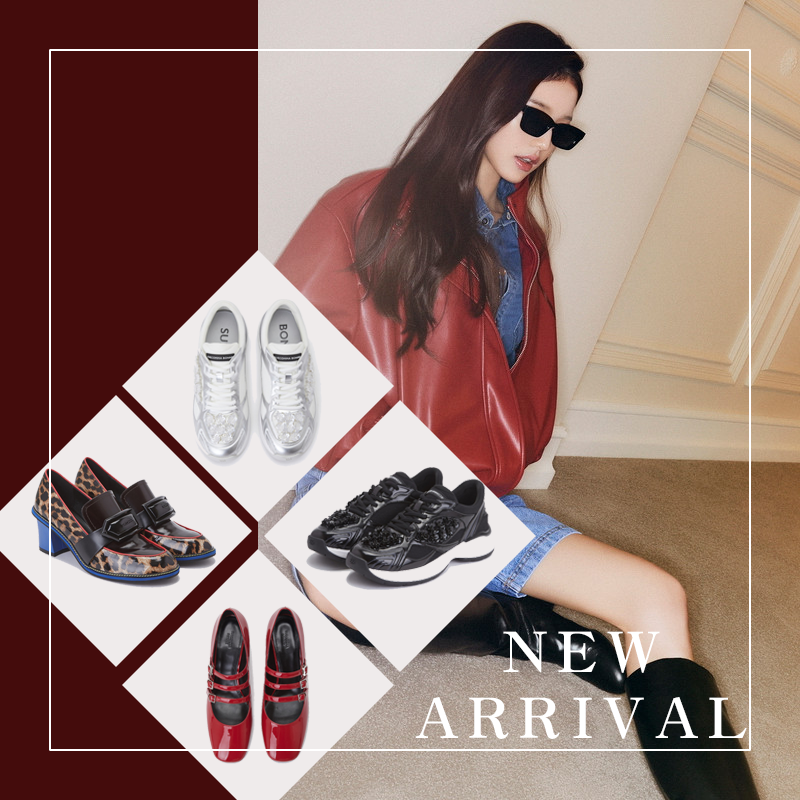
<style>
.page{position:relative;width:800px;height:800px;background:#440c0c}
.page>*{position:absolute;margin:0}
.t1{font:55px "H2mjrE";letter-spacing:0.14em;color:#ffffff}
</style>
<div class="page">
<p class="t1" style="left:415px;top:631px;width:332px;height:108px;text-align:center">NEW<br>ARRIVAL</p>
</div>
